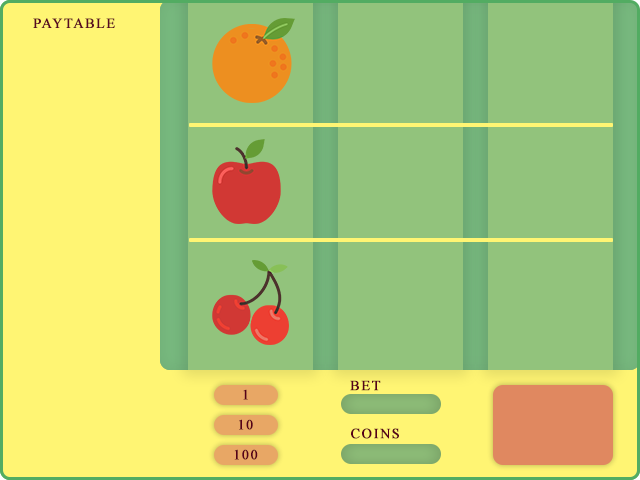
<style>
.page{position:relative;width:640px;height:480px;background:#92c37c}
.page>*{position:absolute;margin:0}
.t1{font:14px "TimesNewRomanPSMT";letter-spacing:0.1em;color:#590a21;font-weight:bold}
.t2{font:14px "TimesNewRomanPSMT";letter-spacing:0.1em;color:#570019;font-weight:bold}
</style>
<div class="page">
<p class="t1" style="left:33px;top:18px;width:82px;height:10px">PAYTABLE</p>
<p class="t2" style="left:243px;top:389px;width:5px;height:11px">1</p>
<p class="t2" style="left:350px;top:380px;width:31px;height:11px">BET</p>
<p class="t2" style="left:239px;top:419px;width:14px;height:11px">10</p>
<p class="t2" style="left:351px;top:428px;width:48px;height:11px">COINS</p>
<p class="t2" style="left:234px;top:449px;width:24px;height:11px">100</p>
</div>
